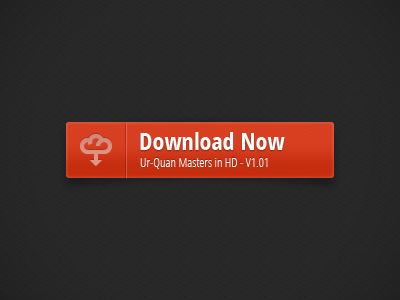
<style>
.page{position:relative;width:400px;height:300px;background:#282828}
.page>*{position:absolute;margin:0}
.t1{font:24px "OpenSans-CondensedBold";color:#ffffff}
.t2{font:13px "OpenSans-CondensedLight";color:#ffffff}
</style>
<div class="page">
<p class="t1" style="left:140px;top:132px;width:145px;height:18px">Download Now</p>
<p class="t2" style="left:140px;top:158px;width:128px;height:11px">Ur-Quan Masters in HD - V1.01</p>
</div>
